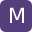
<style>
.page{position:relative;width:32px;height:32px;background:#563d7c}
.page>*{position:absolute;margin:0}
.t1{font:21px "DejaVuSans";color:#ffffff}
</style>
<div class="page">
<p class="t1" style="left:10px;top:7px;width:15px;height:16px">M</p>
</div>
